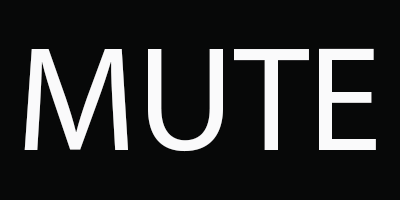
<style>
.page{position:relative;width:400px;height:200px;background:#070808}
.page>*{position:absolute;margin:0}
.t1{font:150px "MyriadPro-Regular";color:#fafafb}
</style>
<div class="page">
<p class="t1" style="left:24px;top:48px;width:352px;height:104px">MUTE</p>
</div>
